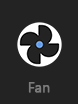
<style>
.page{position:relative;width:78px;height:104px;background:#232323}
.page>*{position:absolute;margin:0}
.t1{font:14px "SegoeUI";color:#7c7c7c;font-weight:bold}
</style>
<div class="page">
<p class="t1" style="left:28px;top:82px;width:22px;height:11px">Fan</p>
</div>
